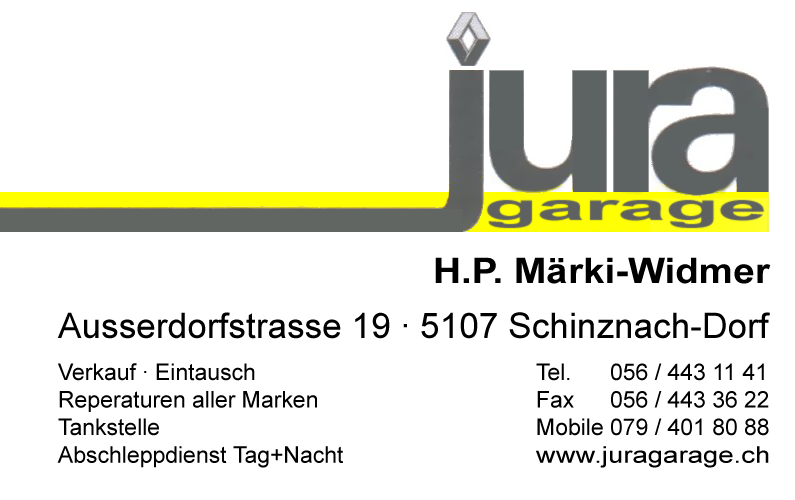
<style>
.page{position:relative;width:795px;height:500px;background:#ffffff}
.page>*{position:absolute;margin:0}
.t1{font:35.2px "Arial-BoldMT";color:#000000;scale:1.1 1}
.t2{font:35.2px "ArialMT";color:#000000}
.t3{font:23px "ArialMT";color:#000000}
.t4{font:23px "ArialMT";color:#000000;scale:1.2 1}
</style>
<div class="page">
<p class="t1" style="left:435px;top:257px;width:336px;height:27px">H.P. Märki-Widmer</p>
<p class="t2" style="left:57px;top:312px;width:713px;height:27px">Ausserdorfstrasse 19 · 5107 Schinznach-Dorf</p>
<p class="t3" style="left:57px;top:363px;width:286px;height:105px">Verkauf · Eintausch<br>Reperaturen aller Marken<br>Tankstelle<br>Abschleppdienst Tag+Nacht</p>
<p class="t4" style="left:536px;top:363px;width:233px;height:105px"><span class="t3">Tel.<br>Fax<br>Mobile<br></span>www.juragarage.ch</p>
<p class="t3" style="left:611px;top:363px;width:158px;height:73px">056 / 443 11 41<br>056 / 443 36 22<br>079 / 401 80 88</p>
</div>
